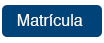
<style>
.page{position:relative;width:104px;height:43px;background:#004379}
.page>*{position:absolute;margin:0}
.t1{font:16px "Helvetica";color:#fdfcf9}
</style>
<div class="page">
<p class="t1" style="left:17px;top:14px;width:66px;height:12px">Matrícula</p>
</div>
